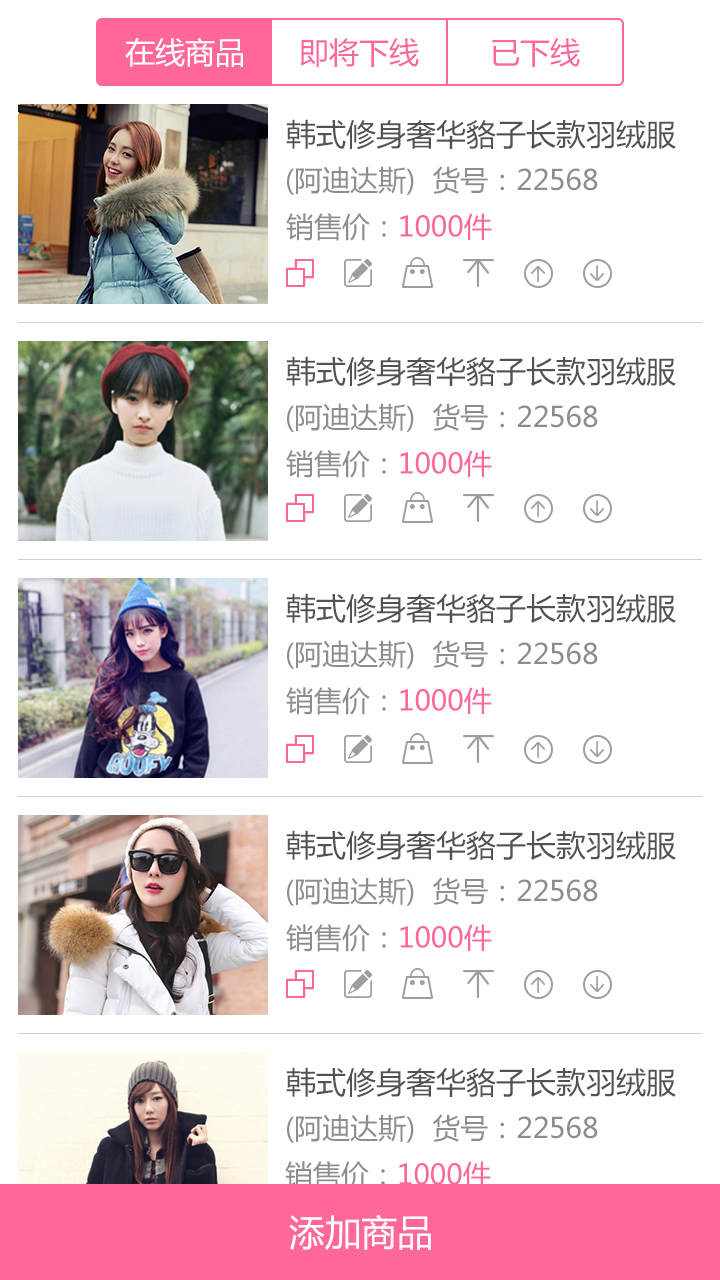
<style>
.page{position:relative;width:720px;height:1280px;background:#ffffff}
.page>*{position:absolute;margin:0}
.t1{font:30px "MicrosoftYaHei";color:#ffffff}
.t2{font:30px "MicrosoftYaHei";color:#fd679a}
.t3{font:30px "MicrosoftYaHei";color:#525252}
.t4{font:28px "MicrosoftYaHei";color:#908b8e}
.t5{font:28px "MicrosoftYaHei";color:#fd679a}
.t6{font:36px "MicrosoftYaHei";color:#ffffff}
</style>
<div class="page">
<p class="t1" style="left:125px;top:38px;width:118px;height:29px">在线商品</p>
<p class="t2" style="left:300px;top:38px;width:119px;height:29px">即将下线</p>
<p class="t2" style="left:492px;top:38px;width:88px;height:29px">已下线</p>
<p class="t3" style="left:286px;top:119px;width:390px;height:31px">韩式修身奢华貉子长款羽绒服</p>
<p class="t4" style="left:287px;top:166px;width:311px;height:29px">(阿迪达斯)  货号：22568</p>
<p class="t5" style="left:286px;top:213px;width:206px;height:28px"><span class="t4">销售价：</span>1000件</p>
<p class="t3" style="left:286px;top:356px;width:390px;height:31px">韩式修身奢华貉子长款羽绒服</p>
<p class="t4" style="left:287px;top:403px;width:311px;height:29px">(阿迪达斯)  货号：22568</p>
<p class="t5" style="left:286px;top:450px;width:206px;height:28px"><span class="t4">销售价：</span>1000件</p>
<p class="t3" style="left:286px;top:593px;width:390px;height:31px">韩式修身奢华貉子长款羽绒服</p>
<p class="t4" style="left:287px;top:640px;width:311px;height:29px">(阿迪达斯)  货号：22568</p>
<p class="t5" style="left:286px;top:687px;width:206px;height:28px"><span class="t4">销售价：</span>1000件</p>
<p class="t3" style="left:286px;top:830px;width:390px;height:31px">韩式修身奢华貉子长款羽绒服</p>
<p class="t4" style="left:287px;top:877px;width:311px;height:29px">(阿迪达斯)  货号：22568</p>
<p class="t5" style="left:286px;top:924px;width:206px;height:28px"><span class="t4">销售价：</span>1000件</p>
<p class="t3" style="left:286px;top:1067px;width:390px;height:31px">韩式修身奢华貉子长款羽绒服</p>
<p class="t4" style="left:287px;top:1114px;width:311px;height:29px">(阿迪达斯)  货号：22568</p>
<p class="t5" style="left:285px;top:1161px;width:206px;height:28px"><span class="t4">销售价：</span>1000件</p>
<p class="t6" style="left:289px;top:1214px;width:142px;height:36px">添加商品</p>
</div>
